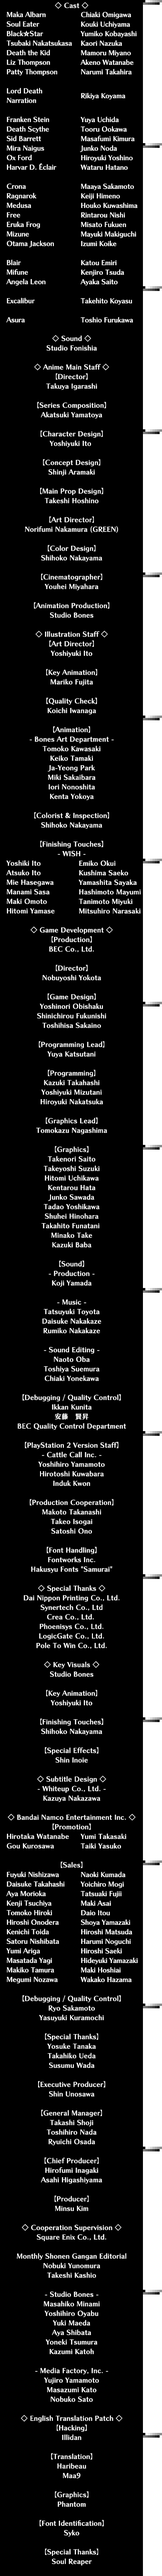
<style>
.page{position:relative;width:162px;height:2576px;background:#000000}
.page>*{position:absolute;margin:0}
.t1{font:6.7px "ChiaroStd-B";letter-spacing:0.025em;color:#ffffff}
.t2{font:6.7px/9.5px "ChiaroStd-B";color:#ffffff}
.t3{font:6.7px/9.5px "ChiaroStd-B";letter-spacing:-0.1em;color:#ffffff}
.t4{font:7.6px/9.5px "SegoeUISymbol";letter-spacing:-0.1em;color:#ffffff;font-weight:bold}
.t5{font:6.7px/14.3px "ChiaroStd-B";color:#ffffff}
.t6{font:6.7px/9.5px "ChiaroStd-B";letter-spacing:0.025em;color:#ffffff}
</style>
<div class="page">
<p class="t1" style="left:55px;top:2px;width:34px;height:7px">◇ Cast ◇</p>
<p class="t2" style="left:6px;top:11px;width:66px;height:311px">Maka Albarn <br>Soul Eater  <br>Blac<span class="t3">k</span><span class="t4">⛤</span>Star <br>Tsubaki Nakatsukasa<br>Death the Kid  <br>Liz Thompson  <br>Patty Thompson <br><br>Lord Death<br>Narration<br><br>Franken Stein<br>Death Scythe<br>Sid Barrett<br>Mira Naigus<br>Ox Ford<br>Harvar D. Éclair <br><br>Crona<br>Ragnarok<br>Medusa<br>Free<br>Eruka Frog<br>Mizune<br>Otama Jackson<br><br>Blair<br>Mifune<br>Angela Leon<br><br>Excalibur<br><br>Asura</p>
<p class="t2" style="left:80px;top:11px;width:58px;height:311px">Chiaki Omigawa<br>Kouki Uchiyama<br>Yumiko Kobayashi<br>Kaori Nazuka<br>Mamoru Miyano<br>Akeno Watanabe<br>Narumi Takahira<br><br><span class="t5">Rikiya Koyama<br><br></span>Yuya Uchida<br>Tooru Ookawa  <br>Masafumi Kimura<br>Junko Noda<br>Hiroyuki Yoshino<br>Wataru Hatano<br><br>Maaya Sakamoto<br>Keiji Himeno<br>Houko Kuwashima<br>Rintarou Nishi<br>Misato Fukuen<br>Mayuki Makiguchi<br>Izumi Koike<br><br>Katou Emiri<br>Kenjiro Tsuda<br>Ayaka Saito<br><br>Takehito Koyasu<br><br>Toshio Furukawa</p>
<p class="t6" style="left:8px;top:335px;width:128px;height:2231px;text-align:center">◇ Sound ◇<br>Studio Fonishia<br><br>◇ Anime Main Staff ◇<br>【Director】<br>Takuya Igarashi<br><br>【Series Composition】<br>Akatsuki Yamatoya<br><br>【Character Design】<br>Yoshiyuki Ito <br><br>【Concept Design】<br>Shinji Aramaki<br><br>【Main Prop Design】<br>Takeshi Hoshino<br><br>【Art Director】<br>Norifumi Nakamura (GREEN)<br><br>【Color Design】<br>Shihoko Nakayama<br><br>【Cinematographer】<br>Youhei Miyahara<br><br>【Animation Production】<br>Studio Bones<br><br>◇ Illustration Staff ◇<br>【Art Director】<br>Yoshiyuki Ito<br><br>【Key Animation】<br>Mariko Fujita<br><br>【Quality Check】<br>Koichi Iwanaga<br><br>【Animation】<br>- Bones Art Department -<br>Tomoko Kawasaki<br>Keiko Tamaki<br>Ja-Yeong Park<br>Miki Sakaibara<br>Iori Nonoshita<br>Kenta Yokoya<br><br>【Colorist &amp; Inspection】<br>Shihoko Nakayama<br><br>【Finishing Touches】<br>- WISH -<br><br><br><br><br><br><br><br>◇ Game Development ◇<br>【Production】<br>BEC Co., Ltd.<br><br>【Director】<br>Nobuyoshi Yokota<br><br>【Game Design】<br>Yoshinori Obishaku<br>Shinichirou Fukunishi<br>Toshihisa Sakaino<br><br>【Programming Lead】<br>Yuya Katsutani<br><br>【Programming】<br>Kazuki Takahashi<br>Yoshiyuki Mizutani<br>Hiroyuki Nakatsuka<br><br>【Graphics Lead】<br>Tomokazu Nagashima<br><br>【Graphics】<br>Takenori Saito<br>Takeyoshi Suzuki<br>Hitomi Uchikawa<br>Kentarou Hata<br>Junko Sawada<br>Tadao Yoshikawa<br>Shuhei Hinohara<br>Takahito Funatani <br>Minako Take<br>Kazuki Baba<br><br>【Sound】<br>- Production -<br>Koji Yamada<br><br>- Music -<br>Tatsuyuki Toyota<br>Daisuke Nakakaze<br>Rumiko Nakakaze<br><br>- Sound Editing -<br>Naoto Oba<br>Toshiya Suemura<br>Chiaki Yonekawa<br><br>【Debugging / Quality Control】<br>Ikkan Kunita<br>安藤　賢昇<br>BEC Quality Control Department<br><br>【PlayStation 2 Version Staff】<br>- Cattle Call Inc. -<br>Yoshihiro Yamamoto<br>Hirotoshi Kuwabara<br>Induk Kwon<br><br>【Production Cooperation】<br>Makoto Takanashi<br>Takeo Isogai<br>Satoshi Ono<br><br>【Font Handling】<br>Fontworks Inc.<br>Hakusyu Fonts "Samurai"<br><br>◇ Special Thanks ◇<br>Dai Nippon Printing Co., Ltd.<br>Synertech Co., Ltd<br>Crea Co., Ltd. <br>Phoenisys Co., Ltd.<br>LogicGate Co., Ltd.<br>Pole To Win Co., Ltd.<br><br>◇ Key Visuals ◇<br>Studio Bones<br><br>【Key Animation】<br>Yoshiyuki Ito<br><br>【Finishing Touches】<br>Shihoko Nakayama<br><br>【Special Effects】<br>Shin Inoie<br><br>◇ Subtitle Design ◇<br>- Whiteup Co., Ltd. -<br>Kazuya Nakazawa<br><br>◇ Bandai Namco Entertainment Inc. ◇<br>【Promotion】<br><br><br><br>【Sales】<br><br><br><br><br><br><br><br><br><br><br><br><br><br>【Debugging / Quality Control】<br>Ryo Sakamoto<br>Yasuyuki Kuramochi<br><br>【Special Thanks】<br>Yosuke Tanaka<br>Takahiko Ueda<br>Susumu Wada<br><br>【Executive Producer】<br>Shin Unosawa<br><br>【General Manager】<br>Takashi Shoji<br>Toshihiro Nada<br>Ryuichi Osada<br><br>【Chief Producer】<br>Hirofumi Inagaki<br>Asahi Higashiyama<br><br>【Producer】<br>Minsu Kim<br><br>◇ Cooperation Supervision ◇<br>Square Enix Co., Ltd.<br><br>Monthly Shonen Gangan Editorial<br>Nobuki Yunomura<br>Takeshi Kashio<br><br>- Studio Bones -<br>Masahiko Minami<br>Yoshihiro Oyabu<br>Yuki Maeda<br>Aya Shibata<br>Yoneki Tsumura<br>Kazumi Katoh<br><br>- Media Factory, Inc. -<br>Yujiro Yamamoto<br>Masazumi Kato<br>Nobuko Sato<br><br>◇ English Translation Patch ◇<br>【Hacking】<br>Illidan<br><br>【Translation】<br>Haribeau<br>Maa9<br><br>【Graphics】<br>Phantom<br><br>【Font Identification】<br>Syko<br><br>【Special Thanks】<br>Soul Reaper</p>
<p class="t6" style="left:6px;top:860px;width:49px;height:54px">Yoshiki Ito<br>Atsuko Ito<br>Mie Hasegawa<br>Manami Sasa<br>Maki Omoto<br>Hitomi Yamase</p>
<p class="t6" style="left:79px;top:860px;width:62px;height:54px">Emiko Okui<br>Kushima Saeko<br>Yamashita Sayaka<br>Hashimoto Mayumi<br>Tanimoto Miyuki<br>Mitsuhiro Narasaki</p>
<p class="t2" style="left:6px;top:1833px;width:63px;height:151px"><span class="t6">Hirotaka Watanabe<br>Gou Kurosawa<br><br><br></span>Fuyuki Nishizawa<br>Daisuke Takahashi <br>Aya Morioka<br>Kenji Tsuchiya<br>Tomoko Hiroki <br>Hiroshi Onodera  <br>Kenichi Toida <br>Satoru Nishibata<br>Yumi Ariga<br>Masatada Yagi<br>Makiko Tamura<br>Megumi Nozawa</p>
<p class="t2" style="left:81px;top:1833px;width:57px;height:149px"><span class="t6">Yumi Takasaki<br>Taiki Yasuko<br><br><br></span>Naoki Kumada <br>Yoichiro Mogi<br>Tatsuaki Fujii<br>Maki Asai<br>Daio Itou <br>Shoya Yamazaki<br>Hiroshi Matsuda <br>Harumi Noguchi<br>Hiroshi Saeki<br>Hideyuki Yamazaki<br>Maki Hoshiai <br>Wakako Hazama</p>
</div>
